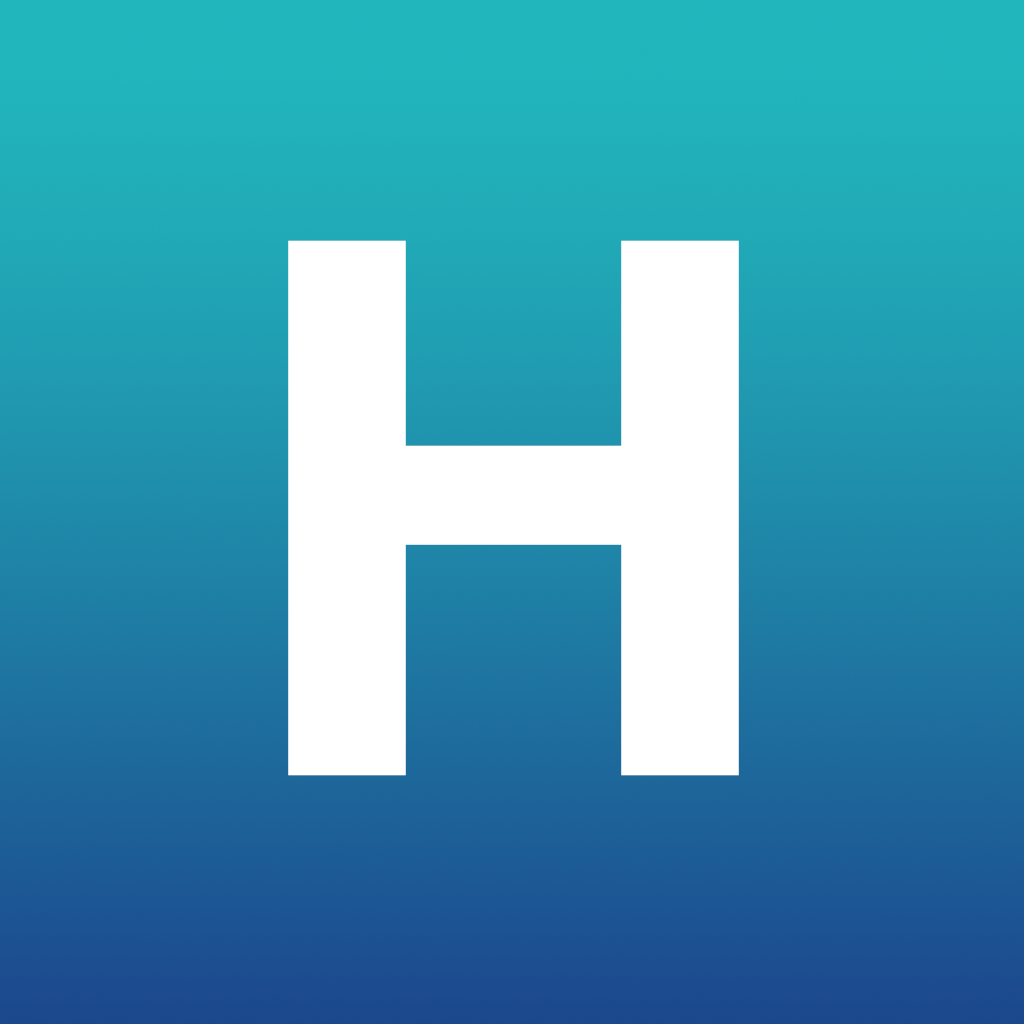
<style>
.page{position:relative;width:1024px;height:1024px}
.page>*{position:absolute;margin:0}
.t1{font:748.1px "HelveticaNeue-Bold";color:#ffffff}
</style>
<div class="page">
<p class="t1" style="left:288px;top:240px;width:451px;height:536px">H</p>
</div>
